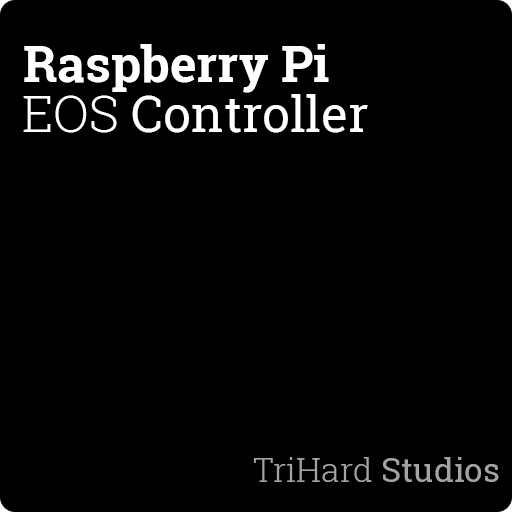
<style>
.page{position:relative;width:512px;height:512px;background:#000000}
.page>*{position:absolute;margin:0}
.t1{font:50px "RobotoSlab-Bold";color:#ffffff}
.t2{font:12px "RobotoSlab-Regular";color:#ffffff}
.t3{font:12px "RobotoSlab-Light";color:#ffffff}
.t4{font:33.3px "RobotoSlab-Light";color:#a3a3a3}
.t5{font:33.3px "RobotoSlab-Regular";color:#a3a3a3}
</style>
<div class="page">
<p class="t1" style="left:24px;top:44px;width:305px;height:49px">Raspberry Pi</p>
<p class="t2" style="left:23px;top:94px;width:345px;height:39px"><span class="t3">EOS </span>Controller</p>
<p class="t4" style="left:253px;top:457px;width:246px;height:25px">TriHard <span class="t5">Studios</span></p>
</div>
